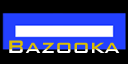
<style>
.page{position:relative;width:128px;height:64px;background:#000000}
.page>*{position:absolute;margin:0}
.t1{font:24px "BankGothicBT-Medium"}
</style>
<div class="page">
<p class="t1" style="left:9px;top:40px;width:111px;height:13px">Bazooka</p>
</div>
